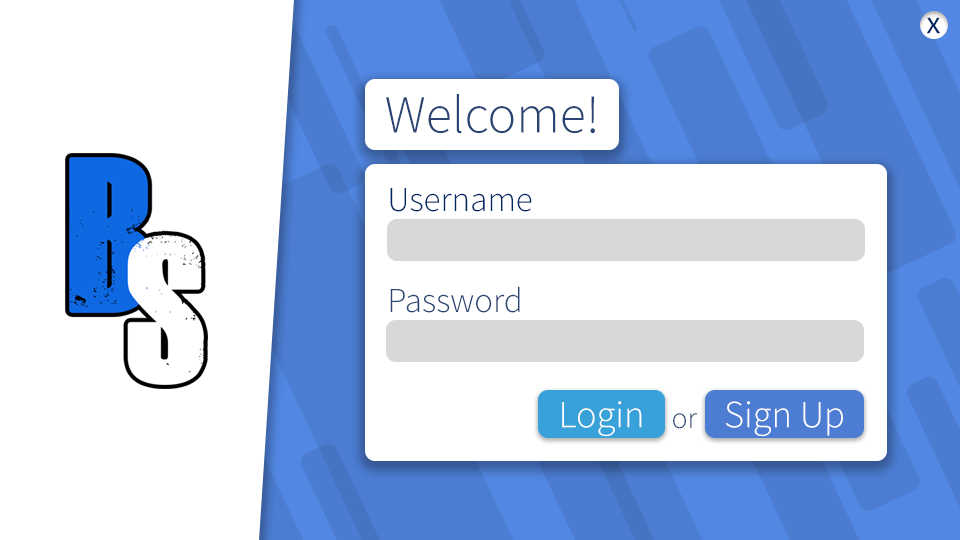
<style>
.page{position:relative;width:960px;height:540px;background:#ffffff}
.page>*{position:absolute;margin:0}
.t1{font:32.1px "SourceSansRoman-Regular";color:#002664}
.t2{font:53.7px "SourceSansRoman-Light";color:#2a4474}
.t3{font:35px "SourceSansRoman-Light";color:#002664}
.t4{font:35px "SourceSansRoman-Light";color:#2a4474}
.t5{font:38.5px "SourceSansRoman-Light";color:#ffffff}
.t6{font:30px "SourceSansRoman-Light";color:#2a4474}
</style>
<div class="page">
<p class="t1" style="left:926px;top:17px;width:15px;height:17px">x</p>
<p class="t2" style="left:386px;top:94px;width:209px;height:40px">Welcome!</p>
<p class="t3" style="left:390px;top:188px;width:142px;height:24px">Username</p>
<p class="t4" style="left:390px;top:286px;width:130px;height:27px">Password</p>
<p class="t5" style="left:562px;top:401px;width:80px;height:36px">Login</p>
<p class="t5" style="left:725px;top:401px;width:118px;height:36px">Sign Up &gt;</p>
<p class="t6" style="left:673px;top:413px;width:24px;height:16px">or</p>
</div>
